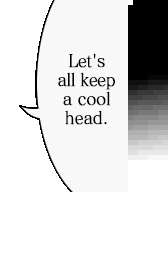
<style>
.page{position:relative;width:168px;height:256px;background:#ffffff}
.page>*{position:absolute;margin:0}
.t1{font:17.6px/19px "MatissePro-M";letter-spacing:-0.05em;color:#000000;font-weight:bold;scale:0.91 1}
.t2{font:17.6px/19px "MatissePro-M";letter-spacing:-0.025em;color:#000000;font-weight:bold;scale:0.91 1}
.t3{font:17.6px/19px "MatissePro-M";letter-spacing:-0.005em;color:#000000;font-weight:bold;scale:0.91 1}
</style>
<div class="page">
<p class="t1" style="left:58px;top:53px;width:57px;height:72px;text-align:center">Let's<br>all keep<br><span class="t2">a cool<br>head</span><span class="t3">.</span></p>
</div>
